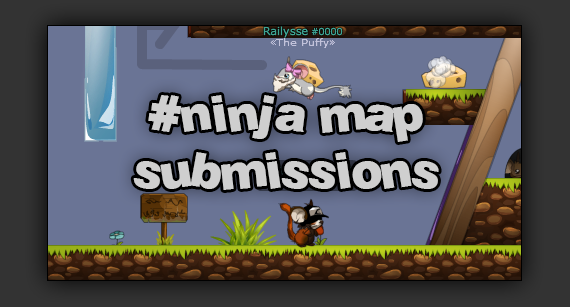
<style>
.page{position:relative;width:570px;height:307px;background:#6a7495}
.page>*{position:absolute;margin:0}
.t1{font:48px "Soopafresh";letter-spacing:0.025em;color:#cfcfcf}
</style>
<div class="page">
<p class="t1" style="left:133px;top:95px;width:306px;height:95px;text-align:center">#ninja map<br>submissions</p>
</div>
